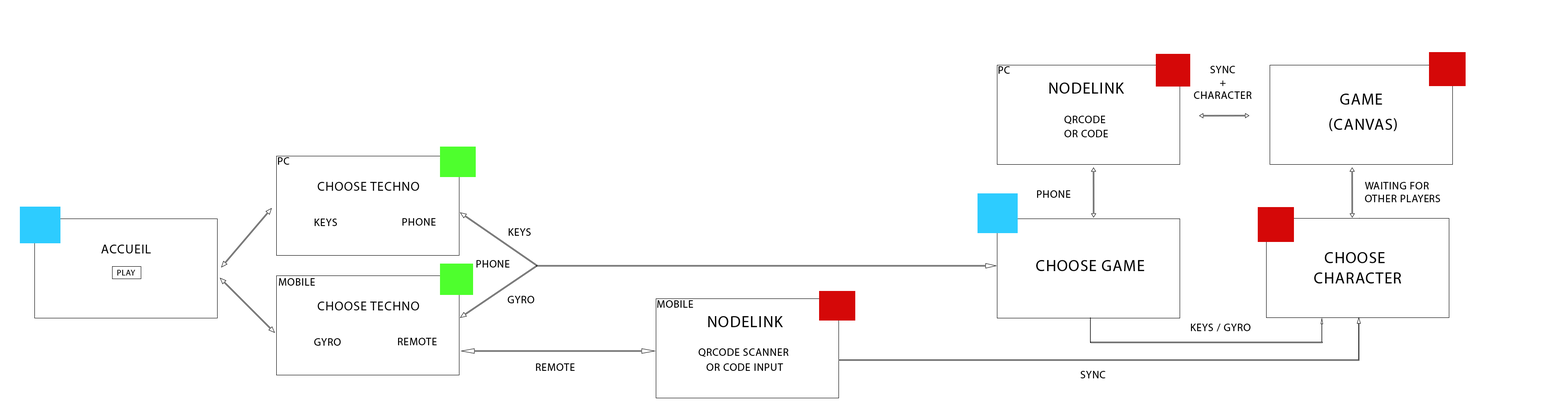
<style>
.page{position:relative;width:1568px;height:419px;background:#ffffff}
.page>*{position:absolute;margin:0}
.t1{font:10.6px "MyriadPro-Regular";letter-spacing:0.05em;color:#000000;text-transform:uppercase}
.t2{font:15.9px "MyriadPro-Regular";letter-spacing:0.05em;color:#000000;text-transform:uppercase}
.t3{font:12.9px "MyriadPro-Regular";letter-spacing:0.05em;color:#000000;text-transform:uppercase}
.t4{font:8.2px "MyriadPro-Regular";letter-spacing:0.05em;color:#000000;text-transform:uppercase}
</style>
<div class="page">
<p class="t1" style="left:1194px;top:66px;width:58px;height:33px;text-align:center">SYNC<br>+<br>CHARACTER</p>
<p class="t1" style="left:998px;top:66px;width:12px;height:8px">PC</p>
<p class="t2" style="left:1049px;top:83px;width:75px;height:11px">NODELINK</p>
<p class="t2" style="left:1340px;top:94px;width:42px;height:11px">GAME</p>
<p class="t1" style="left:1064px;top:116px;width:41px;height:8px">QRCODE</p>
<p class="t2" style="left:1329px;top:118px;width:68px;height:13px">(CANVAS)</p>
<p class="t1" style="left:1064px;top:130px;width:44px;height:7px">OR CODE</p>
<p class="t1" style="left:278px;top:157px;width:12px;height:8px">PC</p>
<p class="t3" style="left:318px;top:182px;width:101px;height:9px">CHOOSE TECHNO</p>
<p class="t1" style="left:1365px;top:182px;width:75px;height:20px">Waiting for <br>other players</p>
<p class="t1" style="left:1037px;top:190px;width:34px;height:8px">PHONE</p>
<p class="t1" style="left:315px;top:218px;width:22px;height:8px">KEYS</p>
<p class="t1" style="left:402px;top:218px;width:34px;height:8px">PHONE</p>
<p class="t1" style="left:508px;top:228px;width:23px;height:8px">KEYS</p>
<p class="t3" style="left:101px;top:244px;width:50px;height:9px">Accueil</p>
<p class="t2" style="left:1325px;top:252px;width:60px;height:11px">CHOOSE</p>
<p class="t4" style="left:117px;top:270px;width:18px;height:5px">Play</p>
<p class="t1" style="left:476px;top:260px;width:34px;height:7px">PHONE</p>
<p class="t2" style="left:1036px;top:260px;width:108px;height:11px">CHOOSE GAME</p>
<p class="t1" style="left:279px;top:278px;width:36px;height:8px">MOBILE</p>
<p class="t2" style="left:1314px;top:272px;width:87px;height:11px">CHARACTER</p>
<p class="t3" style="left:318px;top:301px;width:101px;height:9px">CHOOSE TECHNO</p>
<p class="t1" style="left:508px;top:296px;width:26px;height:7px">GYRO</p>
<p class="t1" style="left:657px;top:300px;width:36px;height:8px">MOBILE</p>
<p class="t2" style="left:708px;top:316px;width:75px;height:11px">NODELINK</p>
<p class="t1" style="left:1191px;top:323px;width:60px;height:8px">KEYS / GYRO</p>
<p class="t1" style="left:314px;top:338px;width:27px;height:8px">GYRO</p>
<p class="t1" style="left:398px;top:338px;width:39px;height:7px">REMOTE</p>
<p class="t1" style="left:699px;top:348px;width:90px;height:9px">QRCODE SCANNER</p>
<p class="t1" style="left:536px;top:363px;width:39px;height:8px">REMOTE</p>
<p class="t1" style="left:707px;top:363px;width:76px;height:8px">OR CODE INPUT</p>
<p class="t1" style="left:1080px;top:371px;width:25px;height:7px">Sync</p>
</div>
